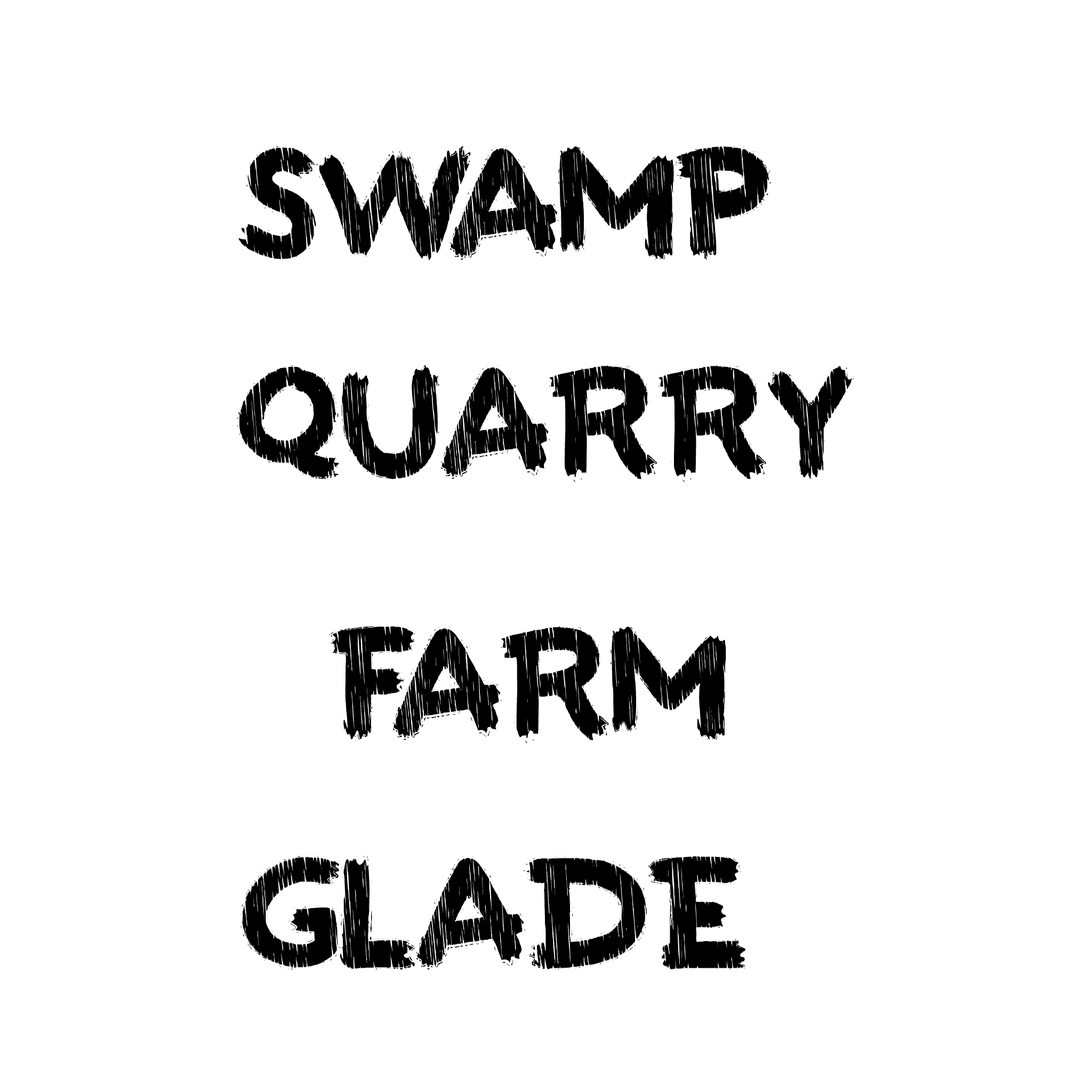
<style>
.page{position:relative;width:1092px;height:1092px;background:#ffffff}
.page>*{position:absolute;margin:0}
.t1{font:160px "Paintthetown";color:#000000}
</style>
<div class="page">
<p class="t1" style="left:238px;top:146px;width:533px;height:114px">SWAMP</p>
<p class="t1" style="left:237px;top:365px;width:617px;height:117px">QUARRY</p>
<p class="t1" style="left:329px;top:626px;width:397px;height:117px">FARM</p>
<p class="t1" style="left:240px;top:856px;width:505px;height:114px">GLADE</p>
</div>
